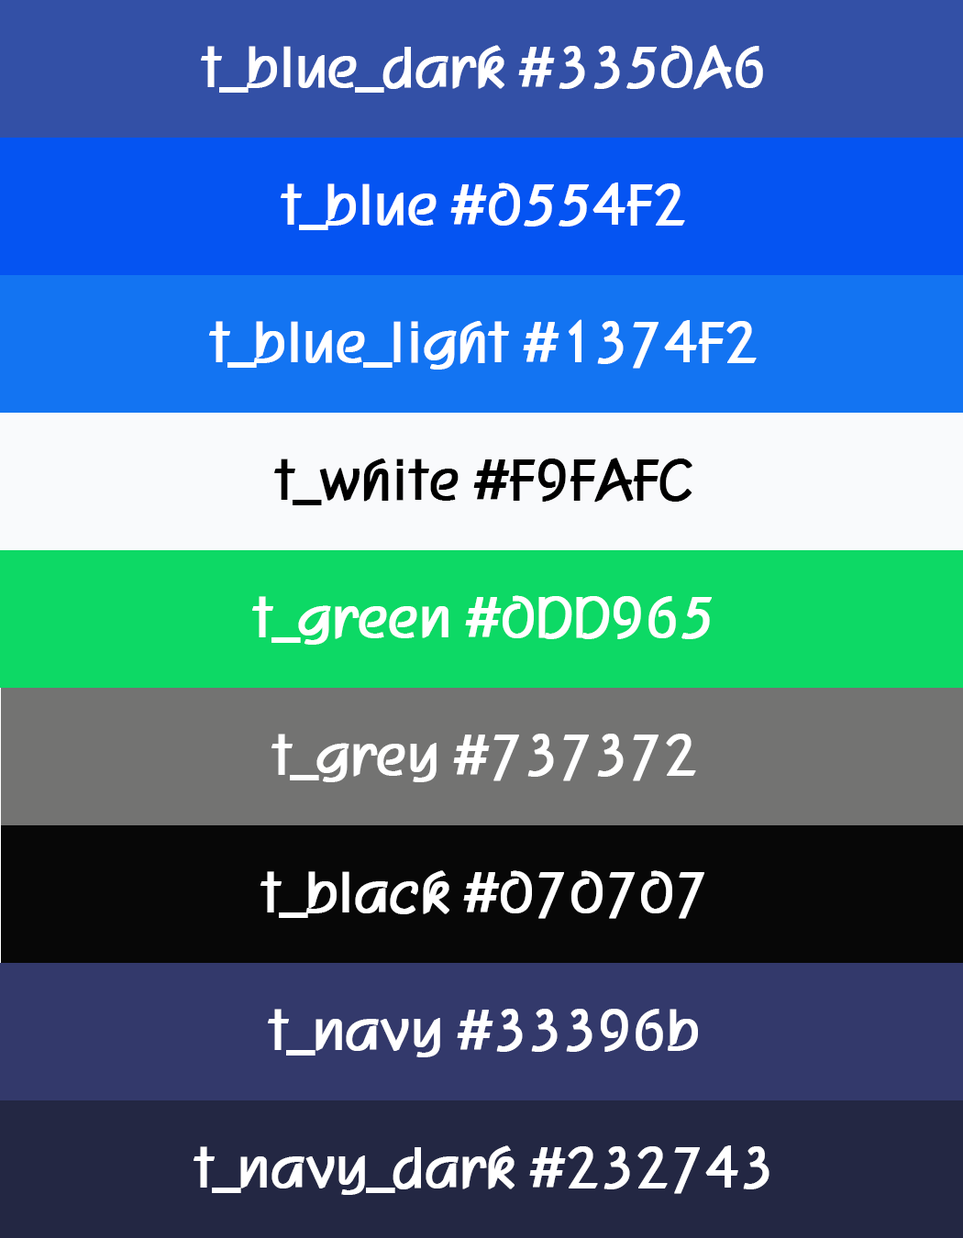
<style>
.page{position:relative;width:963px;height:1238px}
.page>*{position:absolute;margin:0}
.t1{font:55px "H2porM";letter-spacing:-0.1em;color:#ffffff;font-weight:bold}
.t2{font:55px "H2porM";letter-spacing:-0.1em;color:#000000;font-weight:bold}
</style>
<div class="page">
<p class="t1" style="left:201px;top:45px;width:562px;height:48px">t_blue_dark #3350A6</p>
<p class="t1" style="left:281px;top:183px;width:404px;height:47px">t_blue #0554F2</p>
<p class="t1" style="left:209px;top:319px;width:548px;height:51px">t_blue_light #1374F2</p>
<p class="t2" style="left:274px;top:458px;width:418px;height:47px">t_white #F9FAFC</p>
<p class="t1" style="left:252px;top:595px;width:460px;height:50px">t_green #0DD965</p>
<p class="t1" style="left:271px;top:734px;width:425px;height:48px">t_grey #737372</p>
<p class="t1" style="left:260px;top:870px;width:444px;height:49px">t_black #070707</p>
<p class="t1" style="left:268px;top:1009px;width:430px;height:49px">t_navy #33396b</p>
<p class="t1" style="left:194px;top:1146px;width:576px;height:49px">t_navy_dark #232743</p>
</div>
